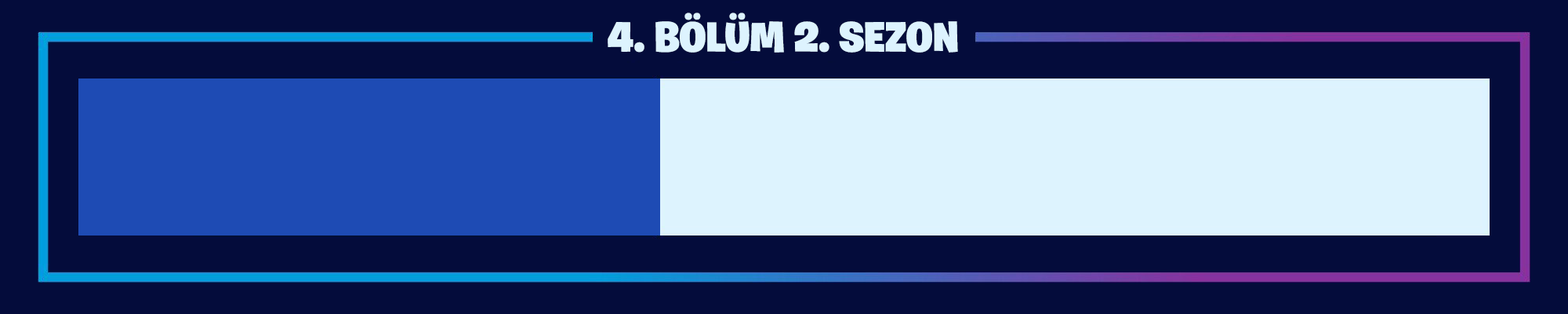
<style>
.page{position:relative;width:1568px;height:314px;background:#040c3b}
.page>*{position:absolute;margin:0}
.t1{font:42.3px "BurbankBigRegular-Black";color:#ddf3fe}
</style>
<div class="page">
<p class="t1" style="left:608px;top:13px;width:350px;height:40px">4. BÖLÜM 2. SEZON</p>
</div>
